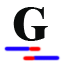
<style>
.page{position:relative;width:64px;height:64px;background:#ffffff}
.page>*{position:absolute;margin:0}
.t1{font:48px "Dutch801BT-ExtraBold";color:#0b0d0c}
</style>
<div class="page">
<p class="t1" style="left:13px;top:7px;width:35px;height:34px">G</p>
</div>
